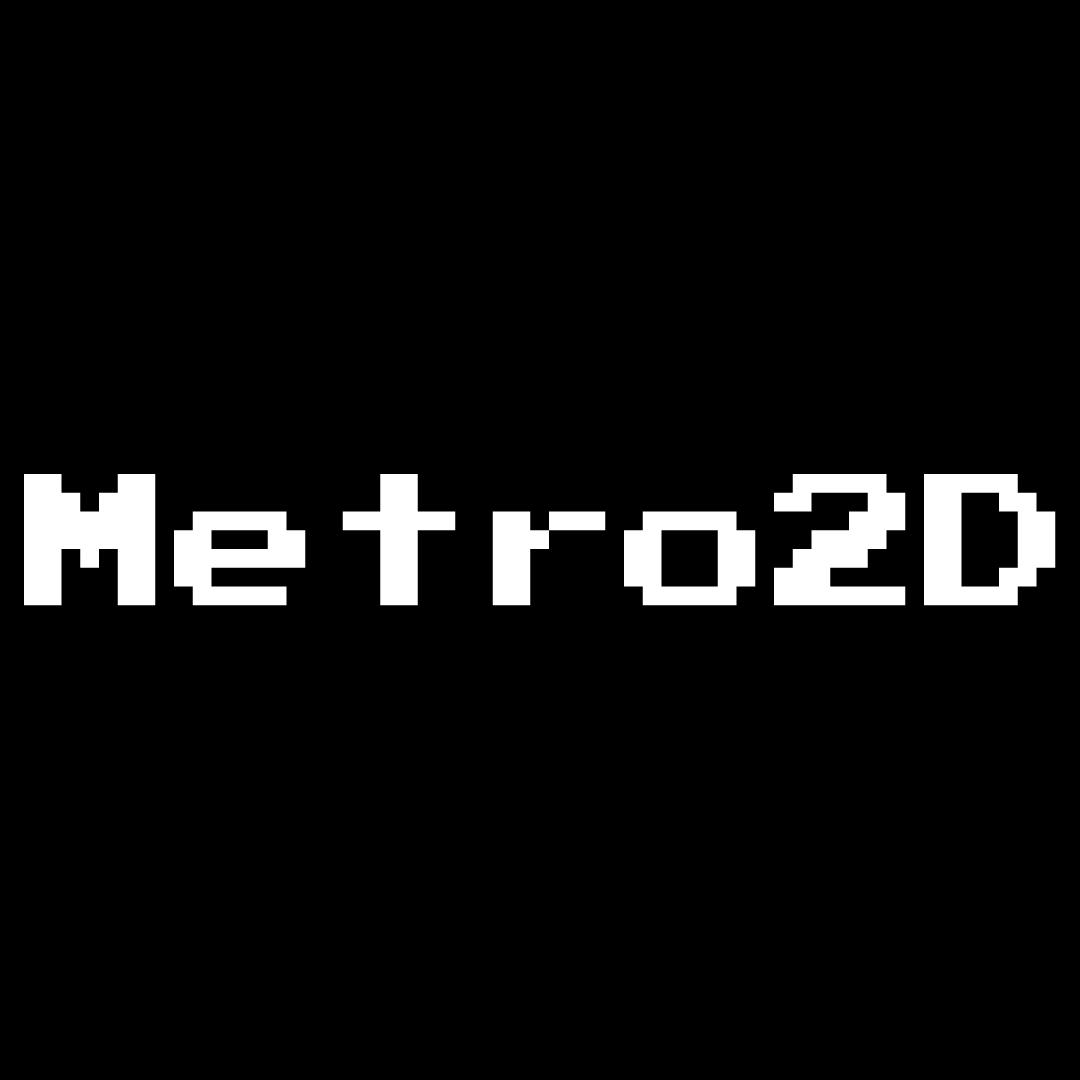
<style>
.page{position:relative;width:1080px;height:1080px;background:#000000}
.page>*{position:absolute;margin:0}
.t1{font:150px "PressStart2P";color:#ffffff}
</style>
<div class="page">
<p class="t1" style="left:24px;top:474px;width:1032px;height:132px">Metro2D</p>
</div>
